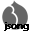
<style>
.page{position:relative;width:32px;height:32px;background:#ffffff}
.page>*{position:absolute;margin:0}
.t1{font:10px "MyriadWebPro";letter-spacing:-0.1em;color:#000000;font-weight:bold}
</style>
<div class="page">
<p class="t1" style="left:4px;top:22px;width:25px;height:9px">jsong</p>
</div>
